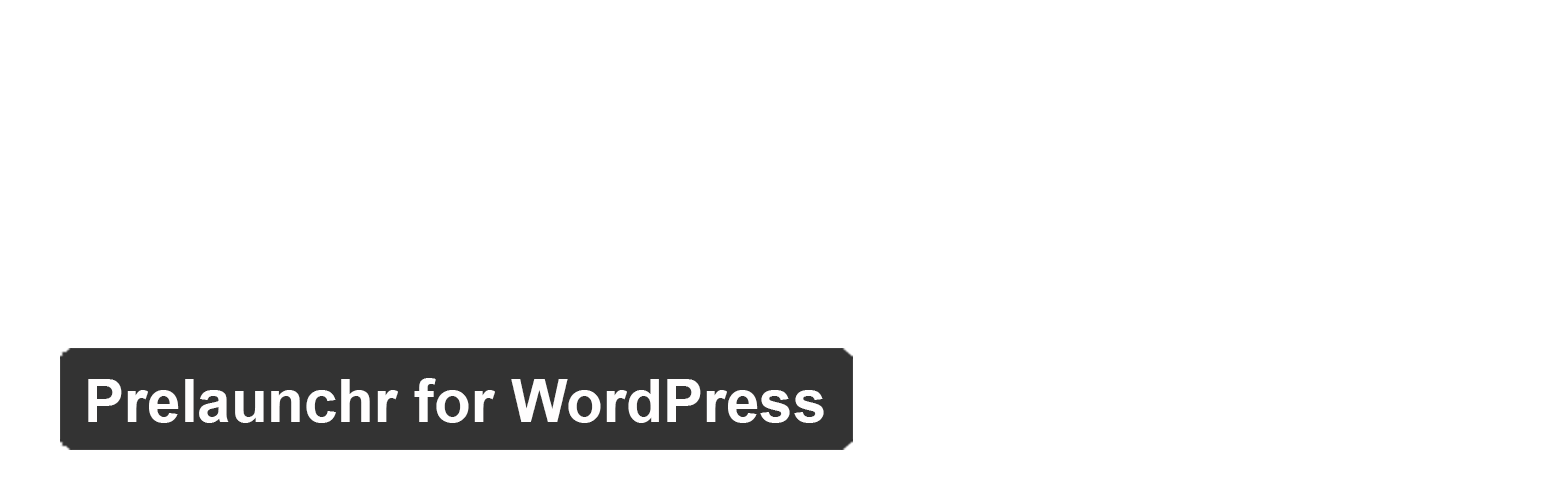
<style>
.page{position:relative;width:1544px;height:500px;background:#ffffff}
.page>*{position:absolute;margin:0}
.t1{font:60px "Arial-BoldMT";color:#fffefe}
</style>
<div class="page">
<p class="t1" style="left:88px;top:378px;width:736px;height:45px">Prelaunchr for WordPress</p>
</div>
